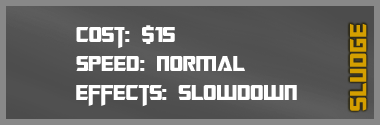
<style>
.page{position:relative;width:380px;height:125px}
.page>*{position:absolute;margin:0}
.t1{font:24px "TransformersMovie";color:#ffffff}
.t2{font:24px "TransformersMovie";letter-spacing:0.04em;color:#ffffff}
.t3{font:24px "TransformersMovie";letter-spacing:0.02em;color:#ffffff}
.t4{font:24px "TransformersMovie";letter-spacing:-0.02em;color:#ffffff}
.t5{font:26px "TransformersMovie";letter-spacing:0.04em;color:#d49f00}
.t6{font:26px "TransformersMovie";letter-spacing:0.06em;color:#d49f00}
</style>
<div class="page">
<p class="t1" style="left:76px;top:25px;width:221px;height:82px">Cost: $15<br>Spee<span class="t2">d</span>: <span class="t3">Normal<br></span>effects: s<span class="t4">l</span><span class="t3">owdown</span></p>
<p class="t5" style="left:350px;top:23px;width:17px;height:88px;rotate:-90deg"><span class="t6">s</span>lu<span class="t6">d</span>ge</p>
</div>
